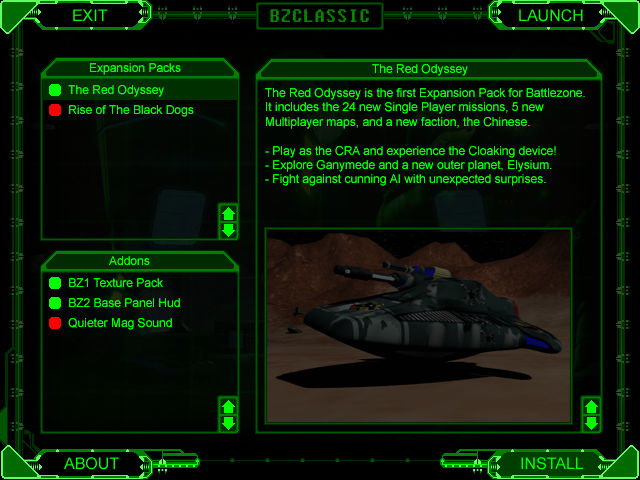
<style>
.page{position:relative;width:640px;height:480px}
.page>*{position:absolute;margin:0}
.t1{font:16px "ArialMT";color:#00ff00}
.t2{font:12px "ArialMT";color:#00ff00}
</style>
<div class="page">
<p class="t1" style="left:73px;top:9px;width:35px;height:12px">EXIT</p>
<p class="t1" style="left:519px;top:9px;width:64px;height:13px">LAUNCH</p>
<p class="t2" style="left:90px;top:63px;width:91px;height:12px">Expansion Packs</p>
<p class="t2" style="left:372px;top:64px;width:96px;height:12px">The Red Odyssey</p>
<p class="t2" style="left:68px;top:85px;width:96px;height:12px">The Red Odyssey</p>
<p class="t2" style="left:265px;top:88px;width:320px;height:98px">The Red Odyssey is the first Expansion Pack for Battlezone. <br>It includes the 24 new Single Player missions, 5 new <br>Multiplayer maps, and a new faction, the Chinese. <br><br>- Play as the CRA and experience the Cloaking device!<br>- Explore Ganymede and a new outer planet, Elysium.<br>- Fight against cunning AI with unexpected surprises.</p>
<p class="t2" style="left:69px;top:105px;width:125px;height:12px">Rise of The Black Dogs</p>
<p class="t2" style="left:109px;top:256px;width:41px;height:9px">Addons</p>
<p class="t2" style="left:69px;top:278px;width:94px;height:9px">BZ1 Texture Pack</p>
<p class="t2" style="left:69px;top:298px;width:111px;height:9px">BZ2 Base Panel Hud</p>
<p class="t2" style="left:68px;top:318px;width:104px;height:12px">Quieter Mag Sound</p>
<p class="t1" style="left:64px;top:457px;width:55px;height:13px">ABOUT</p>
<p class="t1" style="left:521px;top:457px;width:63px;height:13px">INSTALL</p>
</div>
